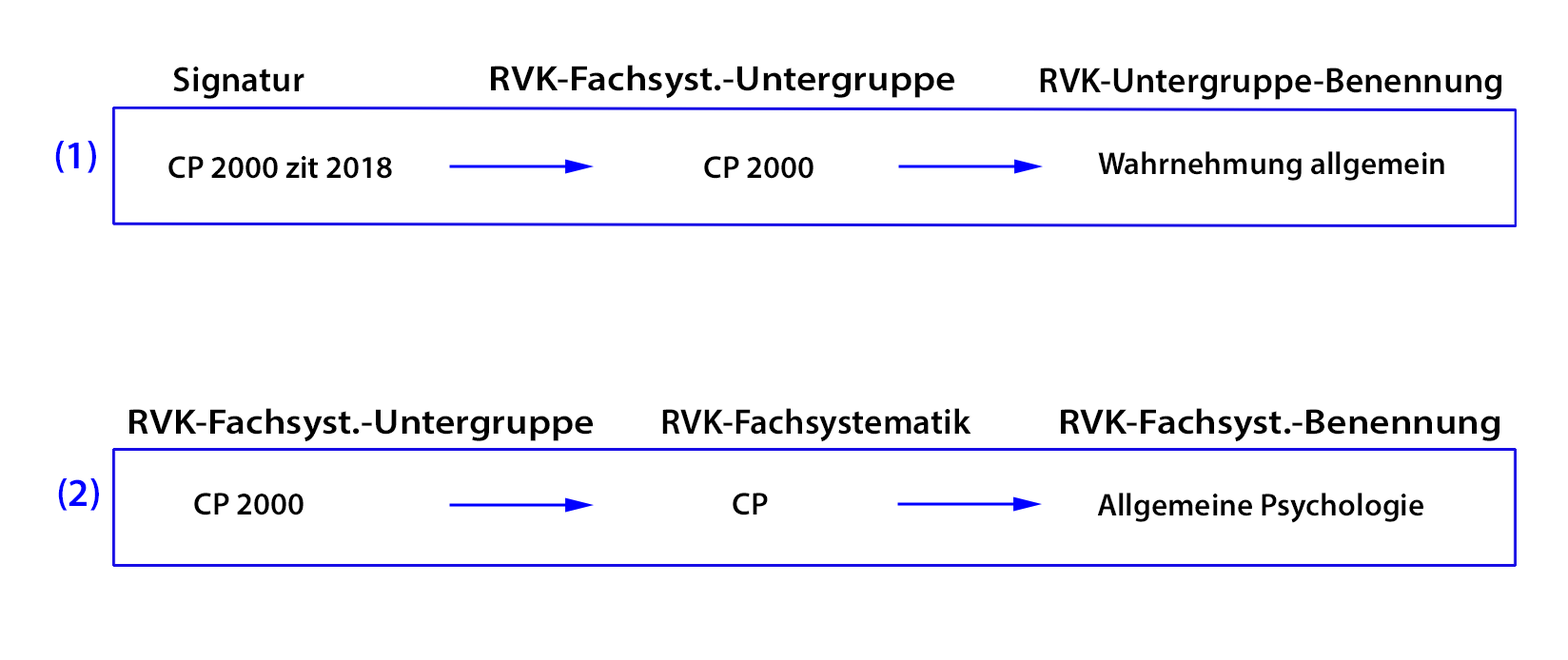
<style>
.page{position:relative;width:1568px;height:660px;background:#ffffff}
.page>*{position:absolute;margin:0}
.t1{font:35.7px "MyriadPro-Semibold";color:#000000;scale:1.1 1}
.t2{font:35.7px "MyriadPro-Semibold";color:#000000}
.t3{font:39.6px "MyriadPro-Semibold";color:#0000ff}
.t4{font:31.7px "MyriadPro-Semibold";color:#000000}
</style>
<div class="page">
<p class="t1" style="left:491px;top:65px;width:463px;height:34px">RVK-Fachsyst.-Untergruppe</p>
<p class="t2" style="left:173px;top:67px;width:131px;height:32px">Signatur</p>
<p class="t2" style="left:1040px;top:68px;width:462px;height:32px">RVK-Untergruppe-Benennung</p>
<p class="t3" style="left:55px;top:140px;width:41px;height:33px">(1)</p>
<p class="t4" style="left:168px;top:156px;width:224px;height:23px">CP 2000 zit 2018</p>
<p class="t4" style="left:704px;top:156px;width:109px;height:23px">CP 2000</p>
<p class="t4" style="left:1098px;top:151px;width:346px;height:30px">Wahrnehmung allgemein</p>
<p class="t1" style="left:129px;top:408px;width:464px;height:34px">RVK-Fachsyst.-Untergruppe</p>
<p class="t2" style="left:662px;top:408px;width:309px;height:34px">RVK-Fachsystematik</p>
<p class="t1" style="left:1061px;top:408px;width:439px;height:34px">RVK-Fachsyst.-Benennung</p>
<p class="t3" style="left:58px;top:478px;width:41px;height:33px">(2)</p>
<p class="t4" style="left:194px;top:493px;width:110px;height:23px">CP 2000</p>
<p class="t4" style="left:733px;top:493px;width:35px;height:23px">CP</p>
<p class="t4" style="left:1097px;top:493px;width:326px;height:30px">Allgemeine Psychologie</p>
</div>
